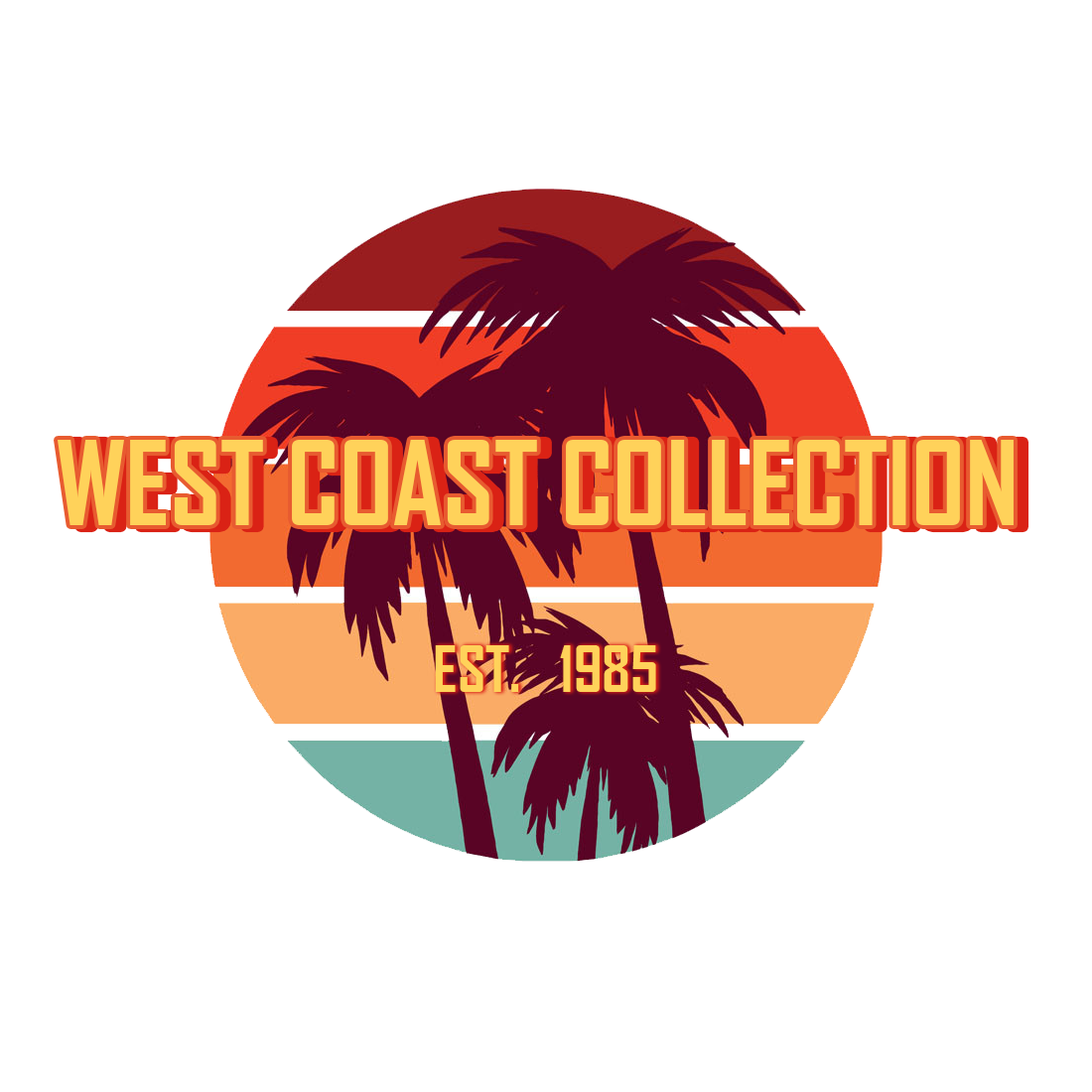
<style>
.page{position:relative;width:1092px;height:1092px;background:#ffffff}
.page>*{position:absolute;margin:0}
.t1{font:111.7px "AgencyFB-Bold";color:#ffd25a}
.t2{font:61.6px "AgencyFB-Bold";color:#ffd25a}
</style>
<div class="page">
<p class="t1" style="left:58px;top:440px;width:956px;height:85px">WEST COAST COLLECTION</p>
<p class="t2" style="left:435px;top:645px;width:221px;height:47px">EST.   1985</p>
</div>
